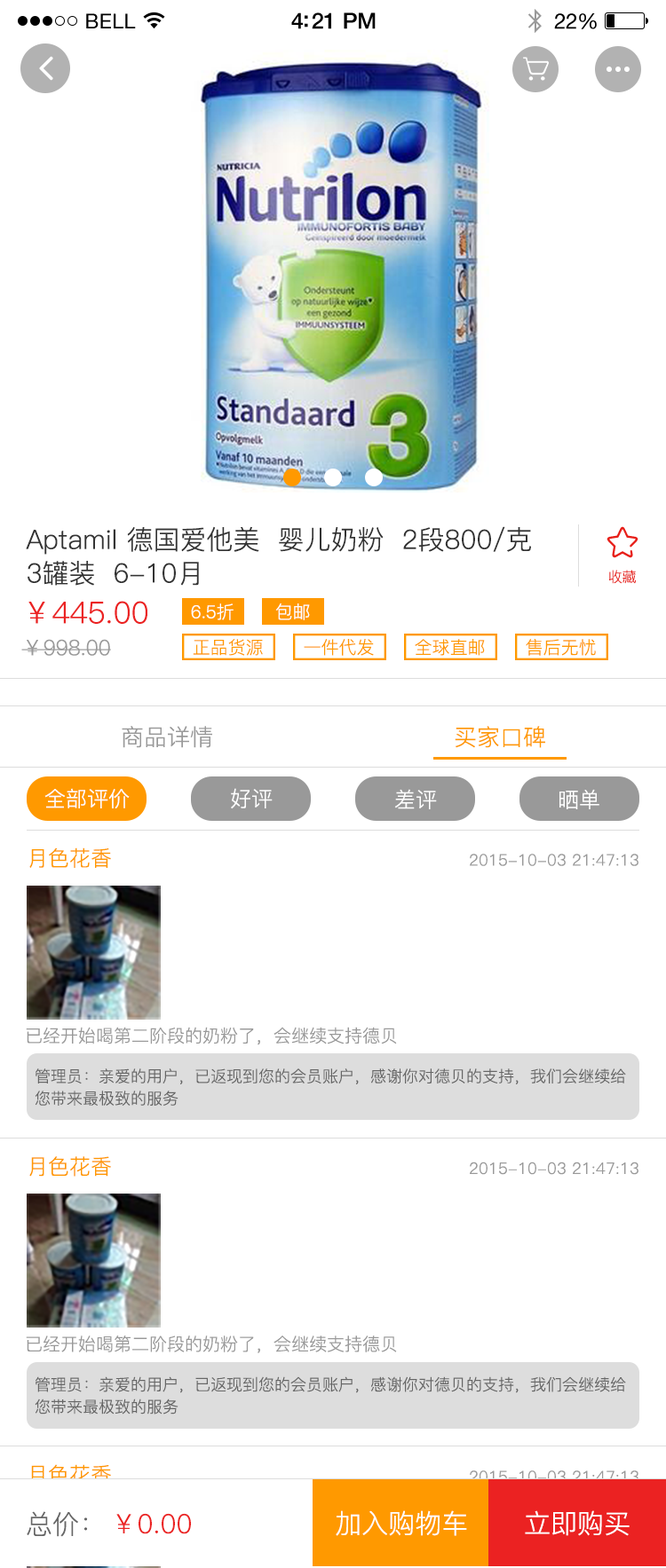
<style>
.page{position:relative;width:666px;height:1568px;background:#ffffff}
.page>*{position:absolute;margin:0}
.t1{font:20.4px "HelveticaNeue";letter-spacing:0.02em;color:#000000}
.t2{font:22.2px "HelveticaNeue-Medium";letter-spacing:-0.02em;color:#000000}
.t3{font:21.3px "HelveticaNeue";letter-spacing:-0.02em;color:#000000}
.t4{font:26.6px/33.7px "PingFang-SC-Regular";color:#333333}
.t5{font:14.2px "PingFang-SC-Regular";color:#e71f19}
.t6{font:30.1px "PingFang-SC-Regular";color:#eb2222}
.t7{font:17.7px "PingFang-SC-Regular";color:#ffffff}
.t8{font:21.3px "PingFang-SC-Regular";color:#999999}
.t9{font:17.7px "PingFang-SC-Regular";color:#ff9900}
.t10{font:23px "PingFang-SC-Regular";color:#999999}
.t11{font:23px "PingFang-SC-Regular";color:#ff9900}
.t12{font:21.3px "PingFang-SC-Regular";color:#ffffff}
.t13{font:21.3px "PingFang-SC-Regular";color:#ff9900}
.t14{font:15.9px "PingFang-SC-Regular";color:#999999}
.t15{font:17.7px "PingFang-SC-Regular";color:#999999}
.t16{font:15.9px/22.1px "PingFang-SC-Regular";color:#666666}
.t17{font:26.6px "PingFang-SC-Regular";color:#666666}
.t18{font:26.6px "PingFang-SC-Regular";color:#eb2222}
.t19{font:26.6px "PingFang-SC-Regular";color:#ffffff}
</style>
<div class="page">
<p class="t1" style="left:86px;top:13px;width:50px;height:15px">BELL</p>
<p class="t2" style="left:291px;top:12px;width:84px;height:17px">4:21 PM</p>
<p class="t3" style="left:554px;top:13px;width:42px;height:16px">22%</p>
<p class="t4" style="left:26px;top:526px;width:505px;height:60px">Aptamil 德国爱他美  婴儿奶粉  2段800/克 <br>3罐装  6-10月</p>
<p class="t5" style="left:609px;top:570px;width:26px;height:14px">收藏</p>
<p class="t6" style="left:28px;top:601px;width:119px;height:23px">￥445.00</p>
<p class="t7" style="left:191px;top:603px;width:42px;height:17px">6.5折</p>
<p class="t7" style="left:275px;top:603px;width:35px;height:17px">包邮</p>
<p class="t8" style="left:21px;top:639px;width:90px;height:17px">￥998.00</p>
<p class="t9" style="left:193px;top:639px;width:70px;height:17px">正品货源</p>
<p class="t9" style="left:303px;top:639px;width:71px;height:17px">一件代发</p>
<p class="t9" style="left:414px;top:639px;width:71px;height:17px">全球直邮</p>
<p class="t9" style="left:525px;top:639px;width:70px;height:17px">售后无忧</p>
<p class="t10" style="left:122px;top:726px;width:90px;height:22px">商品详情</p>
<p class="t11" style="left:454px;top:726px;width:91px;height:22px">买家口碑</p>
<p class="t12" style="left:44px;top:788px;width:86px;height:20px">全部评价</p>
<p class="t12" style="left:231px;top:788px;width:41px;height:21px">好评</p>
<p class="t12" style="left:394px;top:789px;width:43px;height:20px">差评</p>
<p class="t12" style="left:559px;top:789px;width:40px;height:20px">晒单</p>
<p class="t13" style="left:29px;top:847px;width:82px;height:21px">月色花香</p>
<p class="t14" style="left:469px;top:854px;width:169px;height:12px">2015-10-03 21:47:13</p>
<p class="t15" style="left:26px;top:1027px;width:371px;height:18px">已经开始喝第二阶段的奶粉了，会继续支持德贝</p>
<p class="t16" style="left:35px;top:1068px;width:591px;height:38px">管理员：亲爱的用户，已返现到您的会员账户，感谢你对德贝的支持，我们会继续给<br>您带来最极致的服务</p>
<p class="t13" style="left:29px;top:1156px;width:82px;height:21px">月色花香</p>
<p class="t14" style="left:469px;top:1162px;width:169px;height:13px">2015-10-03 21:47:13</p>
<p class="t15" style="left:26px;top:1336px;width:371px;height:17px">已经开始喝第二阶段的奶粉了，会继续支持德贝</p>
<p class="t16" style="left:35px;top:1376px;width:591px;height:38px">管理员：亲爱的用户，已返现到您的会员账户，感谢你对德贝的支持，我们会继续给<br>您带来最极致的服务</p>
<p class="t13" style="left:29px;top:1464px;width:82px;height:21px">月色花香</p>
<p class="t14" style="left:469px;top:1470px;width:169px;height:13px">2015-10-03 21:47:13</p>
<p class="t17" style="left:27px;top:1511px;width:61px;height:26px">总价：</p>
<p class="t18" style="left:116px;top:1513px;width:75px;height:21px">￥0.00</p>
<p class="t19" style="left:335px;top:1510px;width:132px;height:26px">加入购物车</p>
<p class="t19" style="left:524px;top:1510px;width:105px;height:26px">立即购买</p>
</div>
